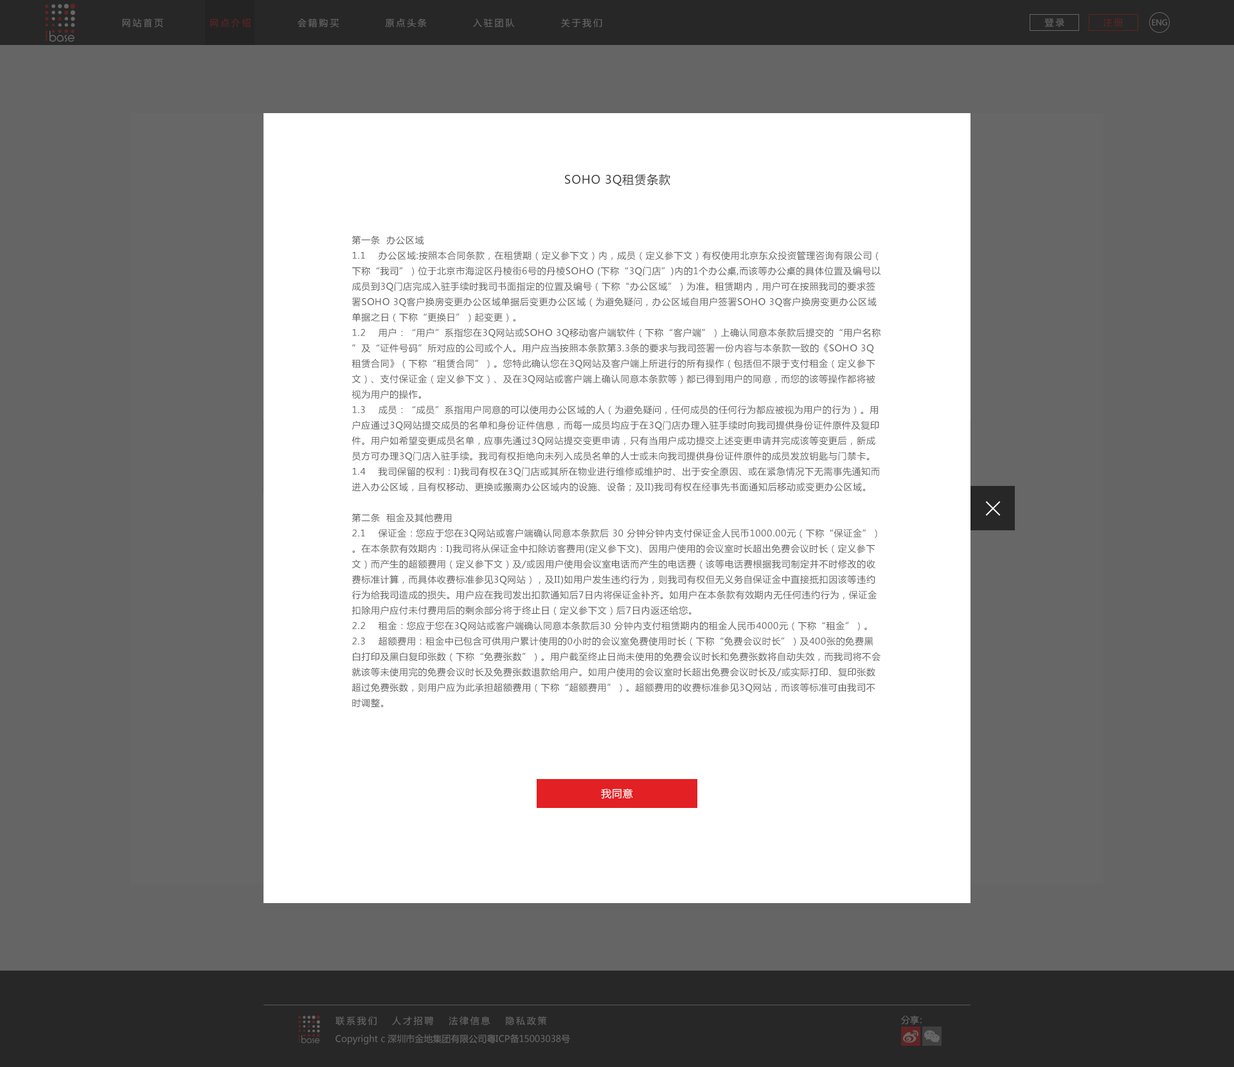
<style>
.page{position:relative;width:1234px;height:1067px;background:#ffffff}
.page>*{position:absolute;margin:0}
.t1{font:9px "MicrosoftYaHei";letter-spacing:0.2em;color:#676767}
.t2{font:9px "MicrosoftYaHei";letter-spacing:0.2em;color:#5f2423}
.t3{font:7.7px "MicrosoftYaHei";letter-spacing:-0.01em;color:#676767}
.t4{font:9px/15.4px "MicrosoftYaHei";letter-spacing:0.05em;color:#5e5e5e;text-transform:uppercase}
.t5{font:11.6px/15.4px "MicrosoftYaHei";letter-spacing:0.05em;color:#373737;text-transform:uppercase}
.t6{font:10.3px "MicrosoftYaHei";letter-spacing:0.05em;color:#ffffff;text-transform:uppercase}
.t7{font:9px "MicrosoftYaHei";letter-spacing:-0.3em;color:#676767}
.t8{font:9px "MicrosoftYaHei";color:#676767}
</style>
<div class="page">
<p class="t1" style="left:122px;top:18px;width:480px;height:10px">网站首页          网点介绍          会籍购买          原点头条          入驻团队          关于我们</p>
<p class="t1" style="left:1045px;top:18px;width:20px;height:9px">登录</p>
<p class="t2" style="left:1103px;top:18px;width:20px;height:9px">注册</p>
<p class="t3" style="left:1152px;top:19px;width:15px;height:7px">ENG</p>
<p class="t4" style="left:352px;top:174px;width:529px;height:534px;text-align:center"><span class="t5">SOHO 3Q租赁条款<br><br><br><br></span>第一条  办公区域<br>1.1    办公区域:按照本合同条款，在租赁期（定义参下文）内，成员（定义参下文）有权使用北京东众投资管理咨询有限公司（下称“我司”）位于北京市海淀区丹棱街6号的丹棱SOHO (下称“3Q门店”)内的1个办公桌,而该等办公桌的具体位置及编号以成员到3Q门店完成入驻手续时我司书面指定的位置及编号（下称“办公区域”）为准。租赁期内，用户可在按照我司的要求签署SOHO 3Q客户换房变更办公区域单据后变更办公区域（为避免疑问，办公区域自用户签署SOHO 3Q客户换房变更办公区域单据之日（下称“更换日”）起变更）。 <br>1.2    用户：“用户”系指您在3Q网站或SOHO 3Q移动客户端软件（下称“客户端”）上确认同意本条款后提交的“用户名称”及“证件号码”所对应的公司或个人。用户应当按照本条款第3.3条的要求与我司签署一份内容与本条款一致的《SOHO 3Q租赁合同》（下称“租赁合同”）。您特此确认您在3Q网站及客户端上所进行的所有操作（包括但不限于支付租金（定义参下文）、支付保证金（定义参下文）、及在3Q网站或客户端上确认同意本条款等）都已得到用户的同意，而您的该等操作都将被视为用户的操作。<br>1.3    成员：“成员”系指用户同意的可以使用办公区域的人（为避免疑问，任何成员的任何行为都应被视为用户的行为）。用户应通过3Q网站提交成员的名单和身份证件信息，而每一成员均应于在3Q门店办理入驻手续时向我司提供身份证件原件及复印件。用户如希望变更成员名单，应事先通过3Q网站提交变更申请，只有当用户成功提交上述变更申请并完成该等变更后，新成员方可办理3Q门店入驻手续。我司有权拒绝向未列入成员名单的人士或未向我司提供身份证件原件的成员发放钥匙与门禁卡。<br>1.4    我司保留的权利：i)我司有权在3Q门店或其所在物业进行维修或维护时、出于安全原因、或在紧急情况下无需事先通知而进入办公区域，且有权移动、更换或搬离办公区域内的设施、设备；及ii)我司有权在经事先书面通知后移动或变更办公区域。<br><br>第二条  租金及其他费用<br>2.1    保证金：您应于您在3Q网站或客户端确认同意本条款后 30 分钟分钟内支付保证金人民币1000.00元（下称“保证金”）。在本条款有效期内：i)我司将从保证金中扣除访客费用(定义参下文)、因用户使用的会议室时长超出免费会议时长（定义参下文）而产生的超额费用（定义参下文）及/或因用户使用会议室电话而产生的电话费（该等电话费根据我司制定并不时修改的收费标准计算，而具体收费标准参见3Q网站），及ii)如用户发生违约行为，则我司有权但无义务自保证金中直接抵扣因该等违约行为给我司造成的损失。用户应在我司发出扣款通知后7日内将保证金补齐。如用户在本条款有效期内无任何违约行为，保证金扣除用户应付未付费用后的剩余部分将于终止日（定义参下文）后7日内返还给您。<br>2.2    租金：您应于您在3Q网站或客户端确认同意本条款后30 分钟内支付租赁期内的租金人民币4000元（下称“租金”）。<br>2.3    超额费用：租金中已包含可供用户累计使用的0小时的会议室免费使用时长（下称“免费会议时长”）及400张的免费黑白打印及黑白复印张数（下称“免费张数”）。用户截至终止日尚未使用的免费会议时长和免费张数将自动失效，而我司将不会就该等未使用完的免费会议时长及免费张数退款给用户。如用户使用的会议室时长超出免费会议时长及/或实际打印、复印张数超过免费张数，则用户应为此承担超额费用（下称“超额费用”）。超额费用的收费标准参见3Q网站，而该等标准可由我司不时调整。</p>
<p class="t6" style="left:601px;top:788px;width:32px;height:11px">我同意</p>
<p class="t1" style="left:336px;top:1016px;width:211px;height:9px">联系我们   人才招聘   法律信息   隐私政策</p>
<p class="t7" style="left:901px;top:1016px;width:21px;height:9px"><span class="t8">分</span>享：</p>
<p class="t8" style="left:336px;top:1034px;width:234px;height:11px">Copyright c 深圳市金地集团有限公司粤ICP备15003038号</p>
</div>
